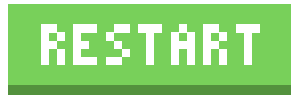
<style>
.page{position:relative;width:300px;height:100px;background:#78d05a}
.page>*{position:absolute;margin:0}
.t1{font:65px "Pixelated";color:#ffffff}
</style>
<div class="page">
<p class="t1" style="left:41px;top:24px;width:219px;height:41px">RESTART</p>
</div>
